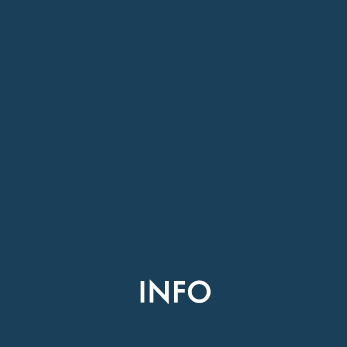
<style>
.page{position:relative;width:347px;height:347px;background:#1a3f58}
.page>*{position:absolute;margin:0}
.t1{font:28px "Futura-Medium";color:#ffffff;font-weight:bold}
</style>
<div class="page">
<p class="t1" style="left:140px;top:279px;width:71px;height:25px">INFO</p>
</div>
